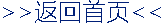
<style>
.page{position:relative;width:167px;height:25px;background:#ffffff}
.page>*{position:absolute;margin:0}
.t1{font:24px "MicrosoftYaHeiLight";color:#001f77}
</style>
<div class="page">
<p class="t1" style="left:3px;top:0px;width:158px;height:23px">&gt;&gt;返回首页&lt;&lt;</p>
</div>
